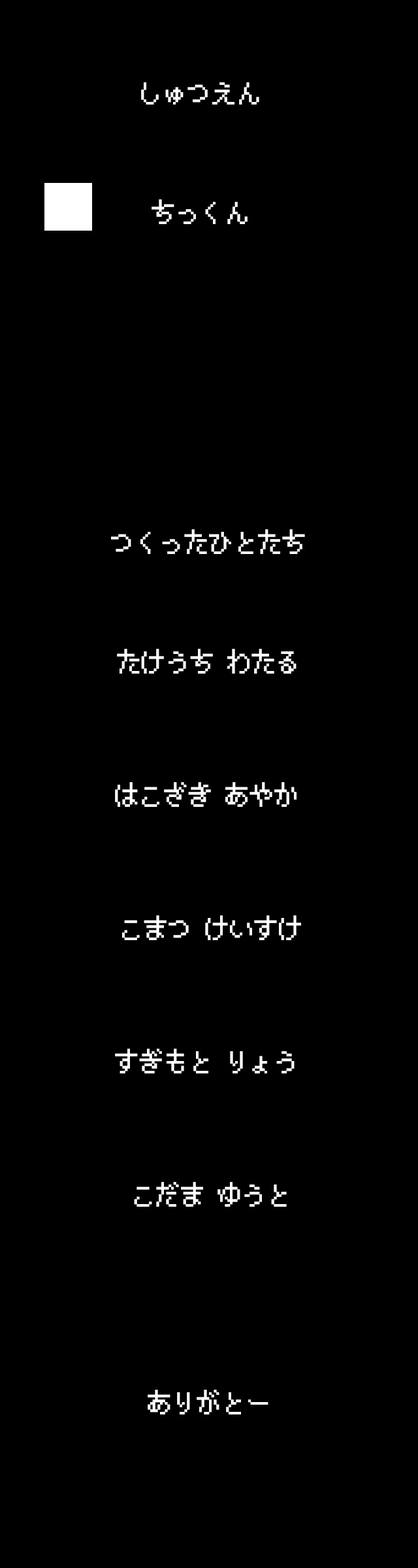
<style>
.page{position:relative;width:418px;height:1568px;background:#000000}
.page>*{position:absolute;margin:0}
.t1{font:24.5px "PixelMplus10-Regular";color:#ffffff}
</style>
<div class="page">
<p class="t1" style="left:141px;top:82px;width:118px;height:23px">しゅつえん</p>
<p class="t1" style="left:152px;top:199px;width:96px;height:25px">ちっくん</p>
<p class="t1" style="left:111px;top:529px;width:194px;height:25px">つくったひとたち</p>
<p class="t1" style="left:117px;top:649px;width:180px;height:25px">たけうち わたる</p>
<p class="t1" style="left:115px;top:782px;width:182px;height:25px">はこざき あやか</p>
<p class="t1" style="left:122px;top:915px;width:179px;height:25px">こまつ けいすけ</p>
<p class="t1" style="left:115px;top:1049px;width:180px;height:24px">すぎもと りょう</p>
<p class="t1" style="left:134px;top:1182px;width:153px;height:25px">こだま ゆうと</p>
<p class="t1" style="left:148px;top:1390px;width:121px;height:24px">ありがとー</p>
</div>
